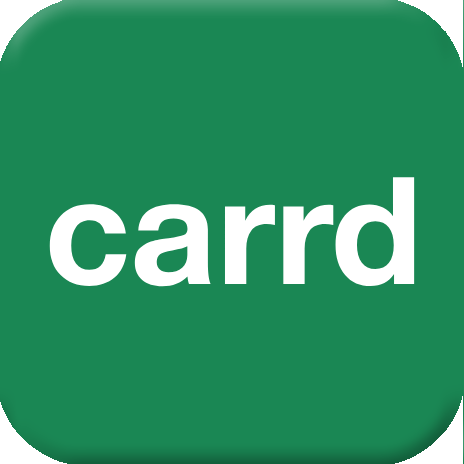
<style>
.page{position:relative;width:464px;height:464px;background:#1a8754}
.page>*{position:absolute;margin:0}
.t1{font:150px "HelveticaNeue-Bold";color:#ffffff}
</style>
<div class="page">
<p class="t1" style="left:49px;top:177px;width:366px;height:110px">carrd</p>
</div>
